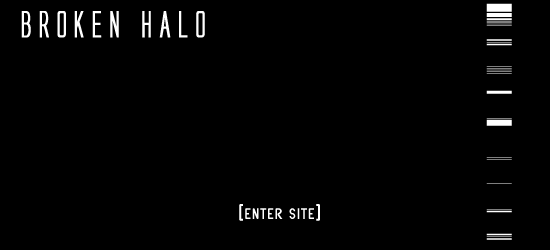
<style>
.page{position:relative;width:550px;height:250px;background:#000000}
.page>*{position:absolute;margin:0}
.t1{font:34px "AlienLeague";letter-spacing:0.035em;color:#ffffff;font-weight:bold}
.t2{font:20px "SFAtarianSystem";letter-spacing:0.035em;color:#ffffff}
</style>
<div class="page">
<p class="t1" style="left:21px;top:11px;width:184px;height:27px">BROKEN HALO</p>
<p class="t2" style="left:239px;top:204px;width:81px;height:17px">[enter site]</p>
</div>
